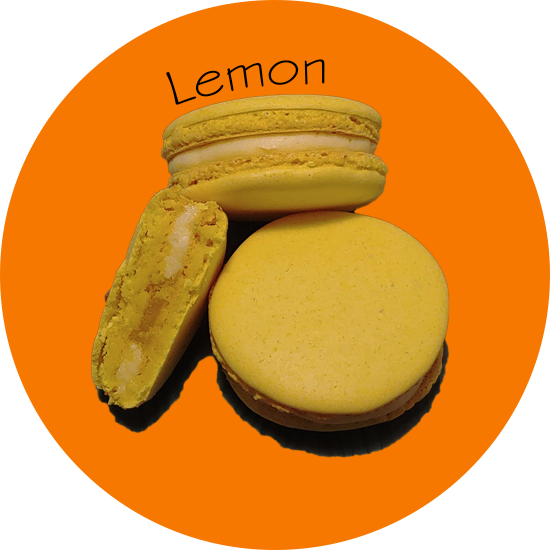
<style>
.page{position:relative;width:550px;height:550px;background:#f77800}
.page>*{position:absolute;margin:0}
.t1{font:52px "StylusBT";color:#000000}
</style>
<div class="page">
<p class="t1" style="left:166px;top:59px;width:159px;height:46px;rotate:-3deg">Lemon</p>
</div>
